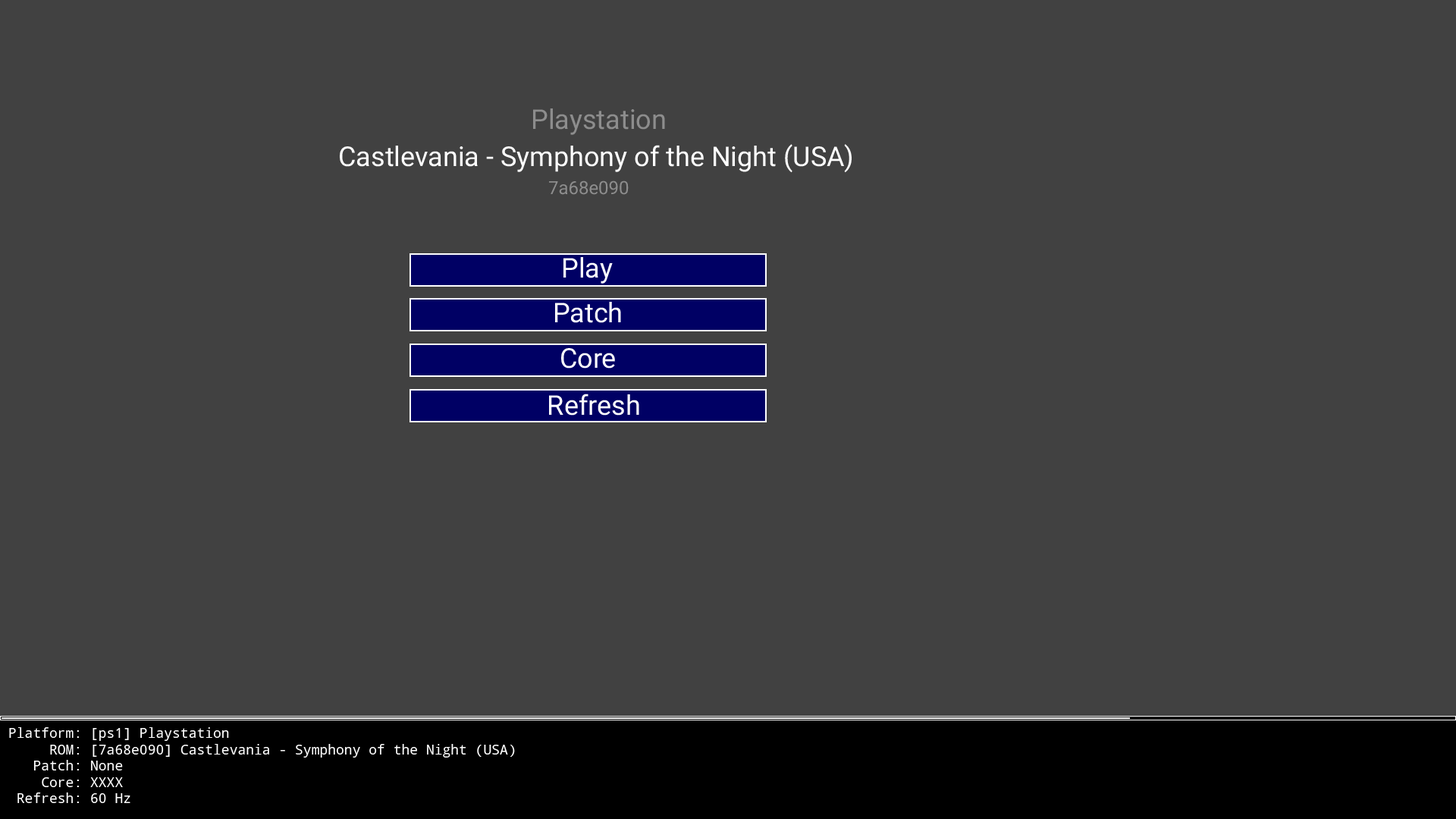
<style>
.page{position:relative;width:1456px;height:819px;background:#414141}
.page>*{position:absolute;margin:0}
.t1{font:27.3px "Roboto-Regular";color:#8d8d8d}
.t2{font:27.3px "Roboto-Regular";color:#ffffff}
.t3{font:18.2px "Roboto-Regular";color:#8d8d8d}
.t4{font:13.6px "NotoMono";color:#ffffff}
</style>
<div class="page">
<p class="t1" style="left:533px;top:108px;width:132px;height:27px">Playstation</p>
<p class="t2" style="left:340px;top:144px;width:512px;height:29px">Castlevania - Symphony of the Night (USA)</p>
<p class="t3" style="left:549px;top:180px;width:80px;height:15px">7a68e090</p>
<p class="t2" style="left:563px;top:257px;width:50px;height:27px">Play</p>
<p class="t2" style="left:555px;top:302px;width:66px;height:21px">Patch</p>
<p class="t2" style="left:561px;top:348px;width:54px;height:21px">Core</p>
<p class="t2" style="left:549px;top:394px;width:90px;height:22px">Refresh</p>
<p class="t4" style="left:9px;top:727px;width:506px;height:76px">Platform: [ps1] Playstation<br>     ROM: [7a68e090] Castlevania - Symphony of the Night (USA)<br>   Patch: None<br>    Core: XXXX<br> Refresh: 60 Hz</p>
</div>
